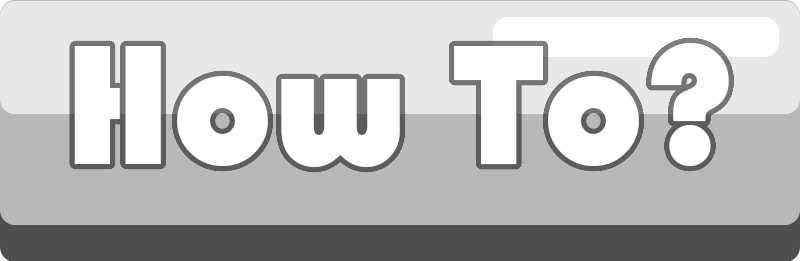
<style>
.page{position:relative;width:800px;height:261px;background:#b8b8b8}
.page>*{position:absolute;margin:0}
.t1{font:177px "Bauhaus93";color:#ffffff}
</style>
<div class="page">
<p class="t1" style="left:74px;top:43px;width:655px;height:124px">How To?</p>
</div>
